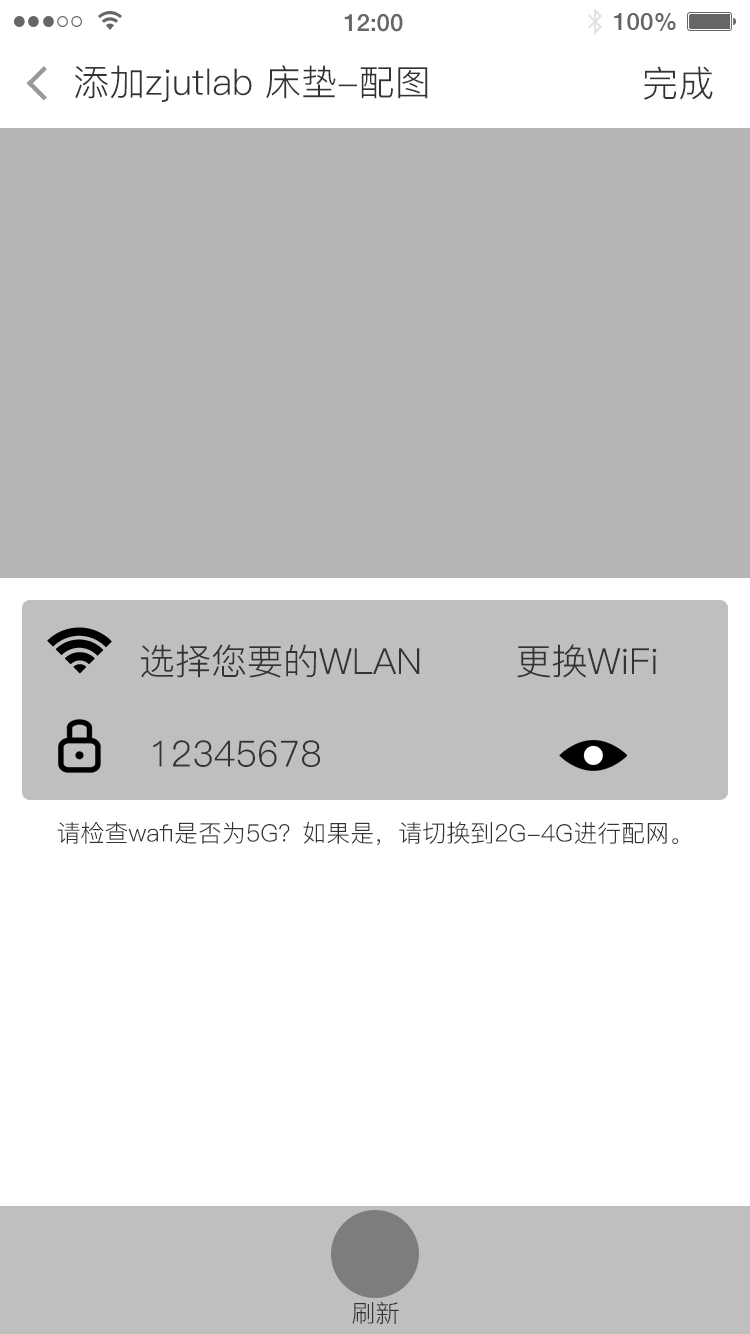
<style>
.page{position:relative;width:750px;height:1334px;background:#ffffff}
.page>*{position:absolute;margin:0}
.t1{font:36px "PingFang-SC-Regular";color:#333333}
.t2{font:24px "PingFang-SC-Regular";color:#333333}
</style>
<div class="page">
<p class="t1" style="left:75px;top:65px;width:353px;height:37px">添加zjutlab 床垫-配图</p>
<p class="t1" style="left:644px;top:66px;width:69px;height:34px">完成</p>
<p class="t1" style="left:141px;top:644px;width:279px;height:34px">选择您要的WLAN</p>
<p class="t1" style="left:517px;top:644px;width:140px;height:34px">更换WiFi</p>
<p class="t1" style="left:153px;top:740px;width:167px;height:27px">12345678</p>
<p class="t2" style="left:57px;top:821px;width:622px;height:25px">请检查wafi是否为5G？如果是，请切换到2G-4G进行配网。</p>
<p class="t2" style="left:352px;top:1301px;width:47px;height:23px">刷新</p>
</div>
